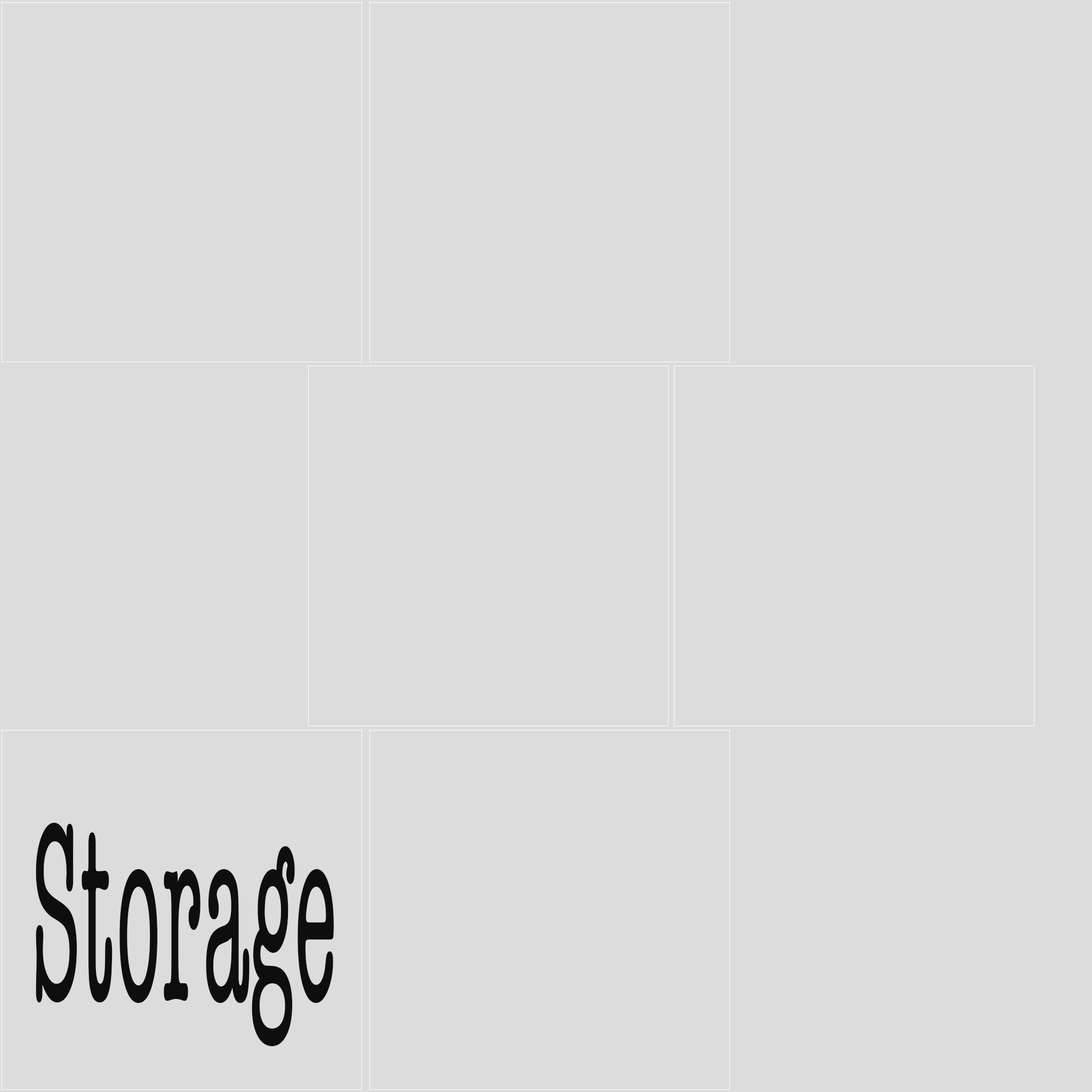
<style>
.page{position:relative;width:1092px;height:1092px;background:#dcdcdc}
.page>*{position:absolute;margin:0}
.t1{font:260.1px "AmericanTypewriter-Condensed";color:#0e0e0e;scale:0.41 1}
</style>
<div class="page">
<p class="t1" style="left:36px;top:823px;width:298px;height:223px">Storage</p>
</div>
